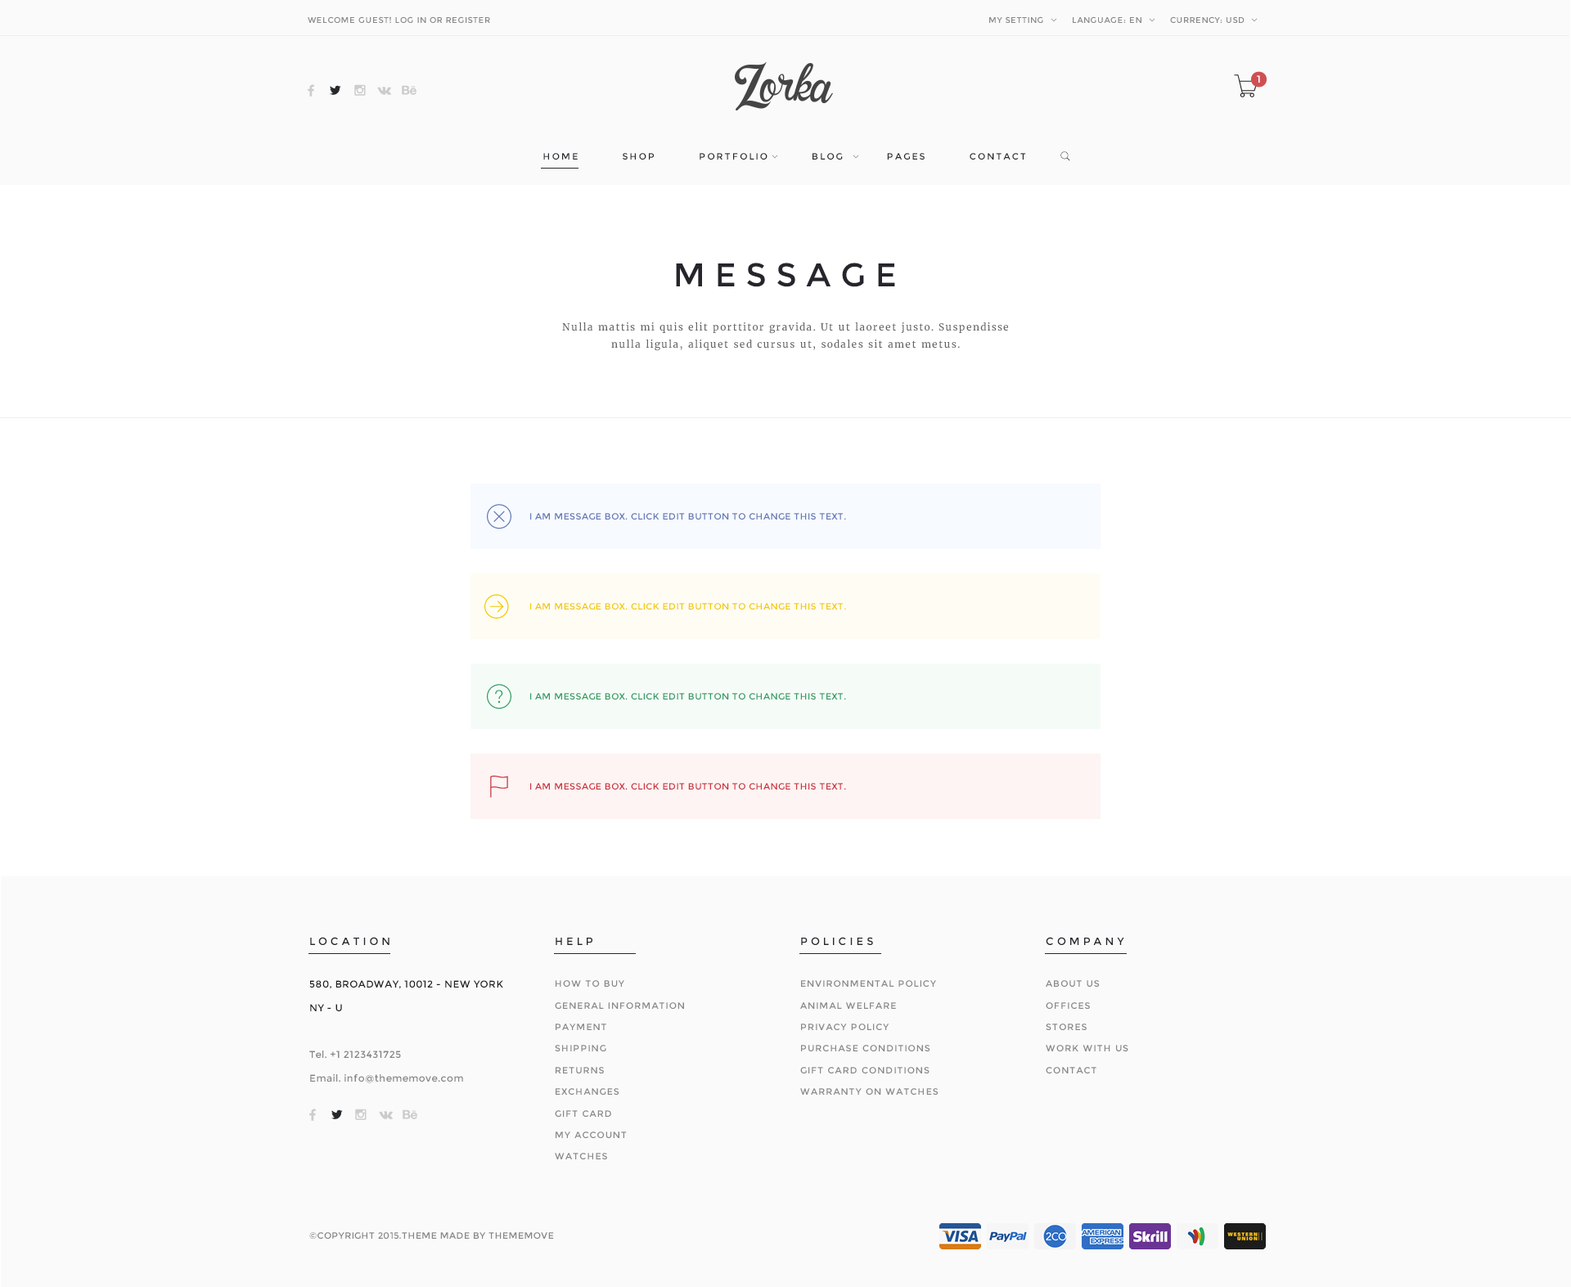
<style>
.page{position:relative;width:1571px;height:1287px;background:#ffffff}
.page>*{position:absolute;margin:0}
.t1{font:8.2px "Montserrat-Regular";letter-spacing:0.05em;color:#888888}
.t2{font:9.8px "Montserrat-Regular";letter-spacing:0.3em;color:#ffffff}
.t3{font:9px "Montserrat-Regular";letter-spacing:0.2em;color:#25292c}
.t4{font:32.7px "Montserrat-Regular";letter-spacing:0.3em;color:#25262c}
.t5{font:9.8px/17.7px "Merriweather-Regular";letter-spacing:0.1em;color:#666666}
.t6{font:9px "Montserrat-Regular";letter-spacing:0.04em;color:#6379b7}
.t7{font:9px "Montserrat-Regular";letter-spacing:0.04em;color:#f2c800}
.t8{font:9px "Montserrat-Regular";letter-spacing:0.04em;color:#339b62}
.t9{font:9px "Montserrat-Regular";letter-spacing:0.04em;color:#cb323e}
.t10{font:10.6px "Montserrat-Regular";letter-spacing:0.3em;color:#25282c}
.t11{font:9.8px/23.6px "Montserrat-Regular";letter-spacing:0.04em;color:#868686}
.t12{font:9.8px/23.6px "Montserrat-Regular";letter-spacing:0.04em;color:#202020}
.t13{font:9px/21.6px "Montserrat-Regular";letter-spacing:0.1em;color:#888888}
.t14{font:9px/21.6px "Montserrat-Regular";letter-spacing:0.1em;color:#878787}
.t15{font:9px "Montserrat-Regular";letter-spacing:0.04em;color:#868686}
</style>
<div class="page">
<p class="t1" style="left:308px;top:16px;width:182px;height:7px">WELCOME GUEST! LOG IN OR REGISTER</p>
<p class="t1" style="left:989px;top:16px;width:54px;height:7px">MY SETTING</p>
<p class="t1" style="left:1073px;top:16px;width:68px;height:7px">LANGUAGE: EN</p>
<p class="t1" style="left:1170px;top:16px;width:74px;height:7px">CURRENCY: USD</p>
<p class="t2" style="left:1257px;top:75px;width:3px;height:8px">1</p>
<p class="t3" style="left:543px;top:153px;width:483px;height:7px">HOME          SHOP          PORTFOLIO          BLOG          PAGES          CONTACT</p>
<p class="t4" style="left:676px;top:263px;width:219px;height:24px">MESSAGE</p>
<p class="t5" style="left:562px;top:322px;width:446px;height:29px;text-align:center">Nulla mattis mi quis elit porttitor gravida. Ut ut laoreet justo. Suspendisse nulla ligula, aliquet sed cursus ut, sodales sit amet metus.</p>
<p class="t6" style="left:530px;top:513px;width:316px;height:7px">I AM MESSAGE BOX. CLICK EDIT BUTTON TO CHANGE THIS TEXT.</p>
<p class="t7" style="left:530px;top:603px;width:316px;height:7px">I AM MESSAGE BOX. CLICK EDIT BUTTON TO CHANGE THIS TEXT.</p>
<p class="t8" style="left:530px;top:693px;width:316px;height:7px">I AM MESSAGE BOX. CLICK EDIT BUTTON TO CHANGE THIS TEXT.</p>
<p class="t9" style="left:530px;top:783px;width:316px;height:7px">I AM MESSAGE BOX. CLICK EDIT BUTTON TO CHANGE THIS TEXT.</p>
<p class="t10" style="left:310px;top:937px;width:79px;height:8px">LOCATION</p>
<p class="t10" style="left:556px;top:938px;width:36px;height:7px">HELP</p>
<p class="t10" style="left:801px;top:937px;width:72px;height:8px">POLICIES</p>
<p class="t10" style="left:1046px;top:937px;width:78px;height:8px">COMPANY</p>
<p class="t11" style="left:309px;top:980px;width:194px;height:103px"><span class="t12">580, BROADWAY, 10012 - NEW YORK <br>NY - U<br><br></span>Tel. +1 2123431725<br>Email. info@thememove.com</p>
<p class="t13" style="left:555px;top:980px;width:129px;height:179px">HOW TO BUY<br>GENERAL INFORMATION<br>PAYMENT<br>SHIPPING<br>RETURNS<br>EXCHANGES<br>GIFT CARD<br>MY ACCOUNT<br>WATCHES</p>
<p class="t13" style="left:800px;top:980px;width:138px;height:115px">ENVIRONMENTAL POLICY<br>ANIMAL WELFARE<br>PRIVACY POLICY<br>PURCHASE CONDITIONS<br>GIFT CARD CONDITIONS<br>WARRANTY ON WATCHES</p>
<p class="t14" style="left:1046px;top:980px;width:82px;height:93px">ABOUT US<br>OFFICES<br>STORES<br>WORK WITH US<br>CONTACT</p>
<p class="t15" style="left:309px;top:1232px;width:245px;height:8px">©COPYRIGHT 2015.THEME MADE BY THEMEMOVE</p>
</div>
